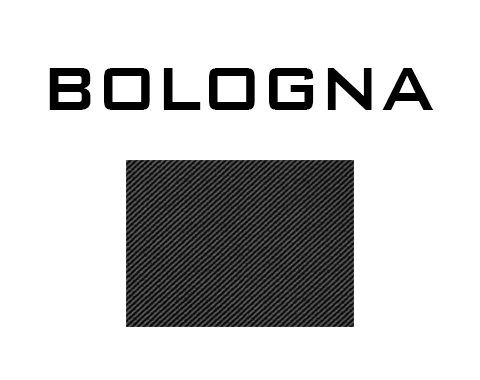
<style>
.page{position:relative;width:480px;height:380px;background:#ffffff}
.page>*{position:absolute;margin:0}
.t1{font:99.6px "BankGothicBT-Medium";color:#000000;scale:0.84 1}
</style>
<div class="page">
<p class="t1" style="left:49px;top:68px;width:385px;height:42px">bologna</p>
</div>
